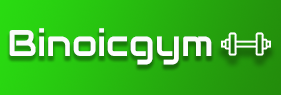
<style>
.page{position:relative;width:281px;height:95px}
.page>*{position:absolute;margin:0}
.t1{font:37px "Audiowide-Regular";color:#fafafa}
</style>
<div class="page">
<p class="t1" style="left:9px;top:28px;width:203px;height:37px">Binoicgym</p>
</div>
